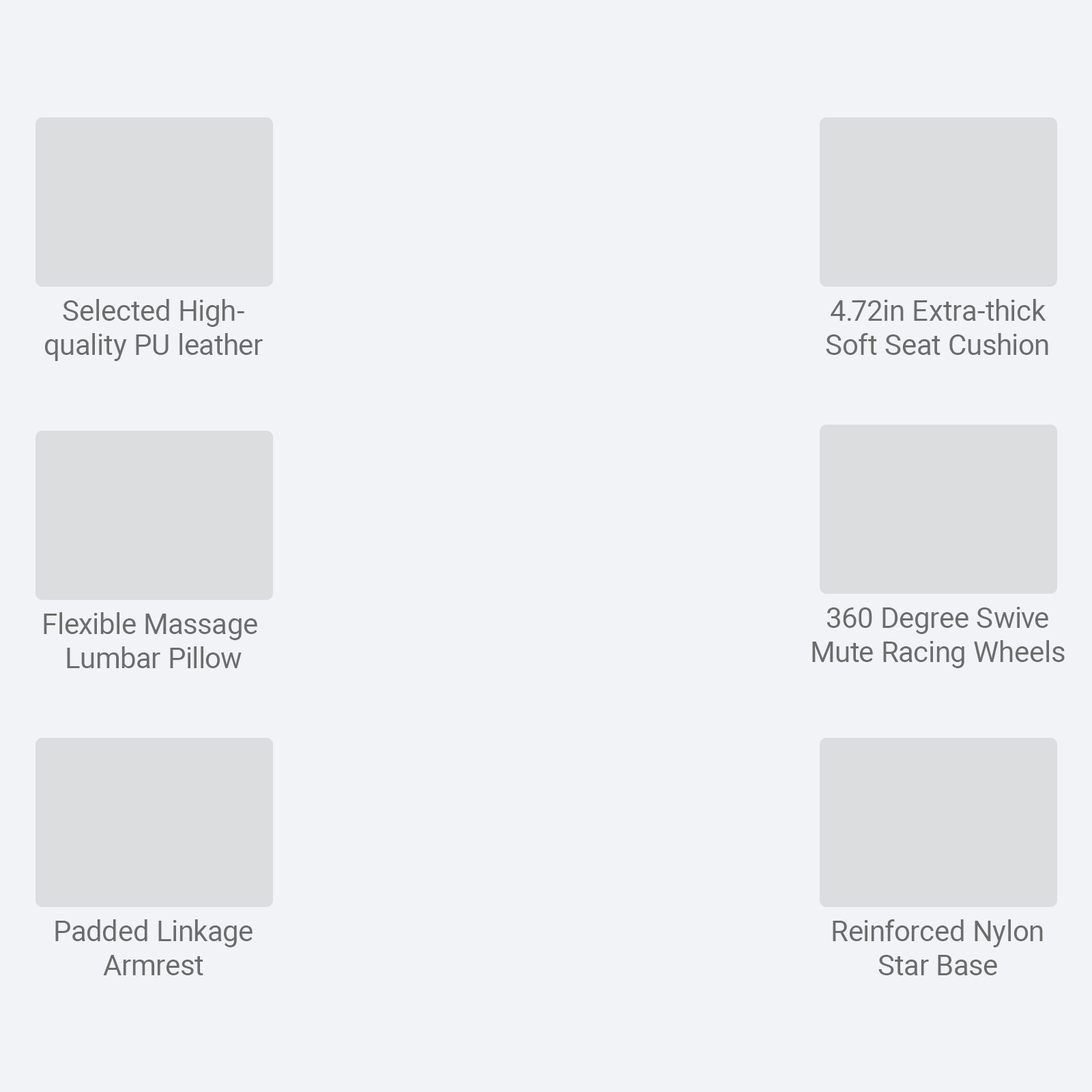
<style>
.page{position:relative;width:1092px;height:1092px;background:#f2f3f6}
.page>*{position:absolute;margin:0}
.t1{font:28.7px "Roboto-Regular";color:#6c6c6c}
</style>
<div class="page">
<p class="t1" style="left:45px;top:299px;width:218px;height:62px;text-align:center">Selected High-<br>quality PU leather</p>
<p class="t1" style="left:826px;top:299px;width:222px;height:56px;text-align:center">4.72in Extra-thick<br>Soft Seat Cushion</p>
<p class="t1" style="left:44px;top:612px;width:213px;height:56px;text-align:center">Flexible Massage <br>Lumbar Pillow</p>
<p class="t1" style="left:812px;top:607px;width:253px;height:61px;text-align:center">360 Degree Swive<br>Mute Racing Wheels</p>
<p class="t1" style="left:55px;top:919px;width:198px;height:56px;text-align:center">Padded Linkage<br>Armrest</p>
<p class="t1" style="left:833px;top:919px;width:210px;height:56px;text-align:center">Reinforced Nylon<br>Star Base</p>
</div>
